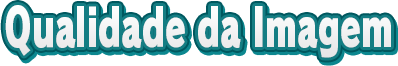
<style>
.page{position:relative;width:398px;height:66px;background:#ffffff}
.page>*{position:absolute;margin:0}
.t1{font:52px "RodinPro-UB";letter-spacing:-0.003em;color:#f2f2f3;scale:0.64 1}
</style>
<div class="page">
<p class="t1" style="left:5px;top:5px;width:386px;height:53px">Qualidade da Imagem</p>
</div>
